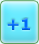
<style>
.page{position:relative;width:39px;height:44px}
.page>*{position:absolute;margin:0}
.t1{font:16px "Verdana-Bold"}
</style>
<div class="page">
<p class="t1" style="left:7px;top:18px;width:23px;height:12px">+1</p>
</div>
